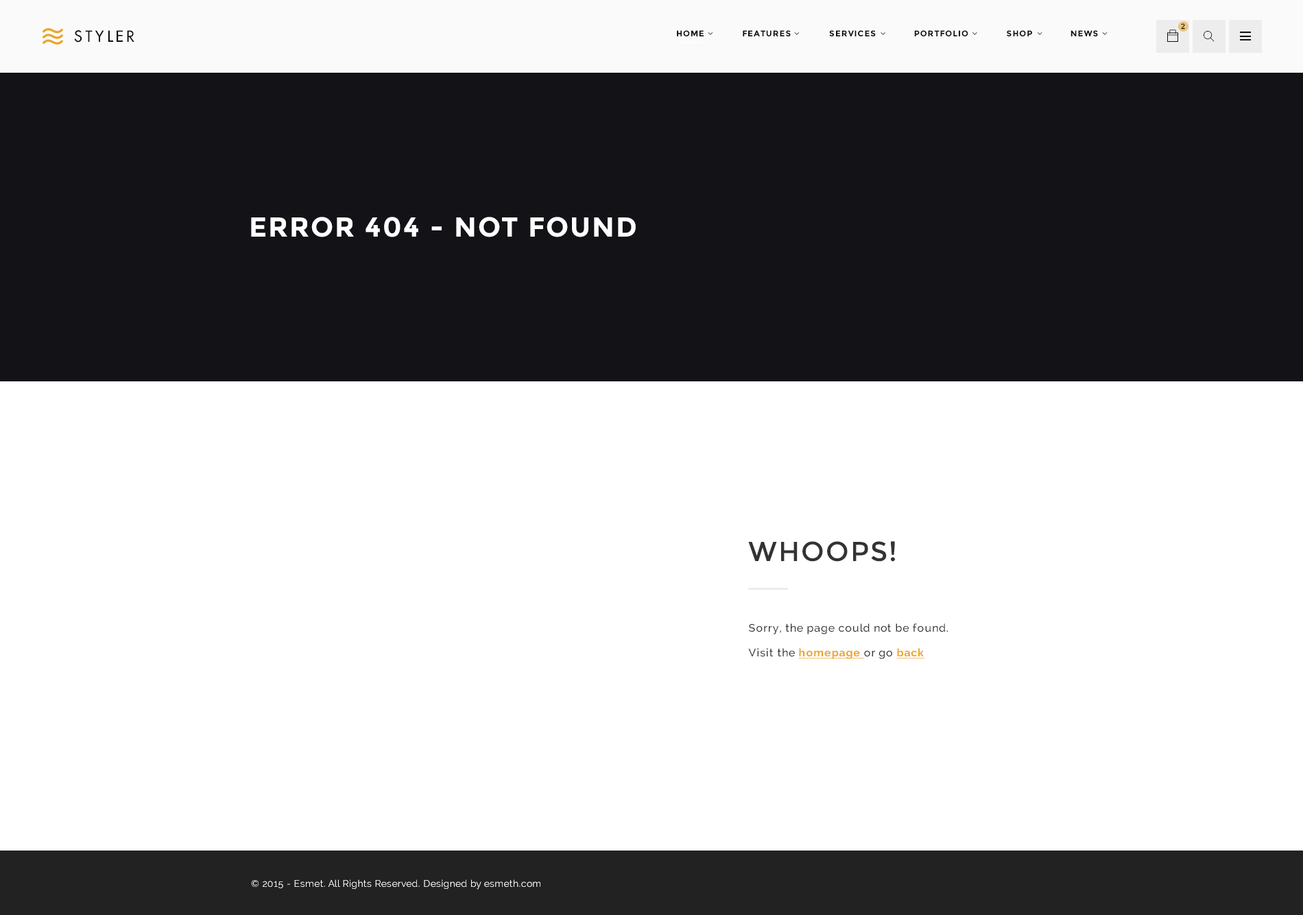
<style>
.page{position:relative;width:1303px;height:915px;background:#ffffff}
.page>*{position:absolute;margin:0}
.t1{font:7.5px "Montserrat-Regular";letter-spacing:0.075em;color:#111111;text-transform:uppercase}
.t2{font:15.1px "FuturaLT";letter-spacing:0.2em;color:#111111;text-transform:uppercase}
.t3{font:8.2px "Montserrat-Bold";letter-spacing:0.075em;color:#111111;text-transform:uppercase}
.t4{font:27.4px "Montserrat-Bold";letter-spacing:0.05em;color:#ffffff;text-transform:uppercase}
.t5{font:27.4px "Montserrat-Regular";letter-spacing:0.05em;color:#333333;text-transform:uppercase}
.t6{font:11px/24.7px "Raleway-Medium";letter-spacing:0.05em;color:#333333}
.t7{font:11px/24.7px "Raleway-Bold";letter-spacing:0.05em;color:#eba62a;text-decoration:underline}
.t8{font:9.6px "Raleway";letter-spacing:0.02em;color:#ffffff}
</style>
<div class="page">
<p class="t1" style="left:1181px;top:23px;width:4px;height:6px">2</p>
<p class="t2" style="left:74px;top:30px;width:60px;height:13px">styler</p>
<p class="t3" style="left:677px;top:30px;width:421px;height:6px">HOME              FEATURES              SERVICES              portfolio              SHOP              NEWS</p>
<p class="t4" style="left:251px;top:217px;width:385px;height:20px">error 404 - not found</p>
<p class="t5" style="left:748px;top:541px;width:147px;height:21px">Whoops!</p>
<p class="t6" style="left:748px;top:623px;width:200px;height:36px">Sorry, the page could not be found.<br>Visit the <span class="t7">homepage </span>or go <span class="t7">back</span></p>
<p class="t8" style="left:251px;top:879px;width:289px;height:11px">© 2015 - Esmet. All Rights Reserved. Designed by esmeth.com</p>
</div>
